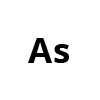
<style>
.page{position:relative;width:100px;height:100px;background:#ffffff}
.page>*{position:absolute;margin:0}
.t1{font:35px "OpenSans-Bold";color:#000000}
</style>
<div class="page">
<p class="t1" style="left:28px;top:38px;width:41px;height:25px">As</p>
</div>
